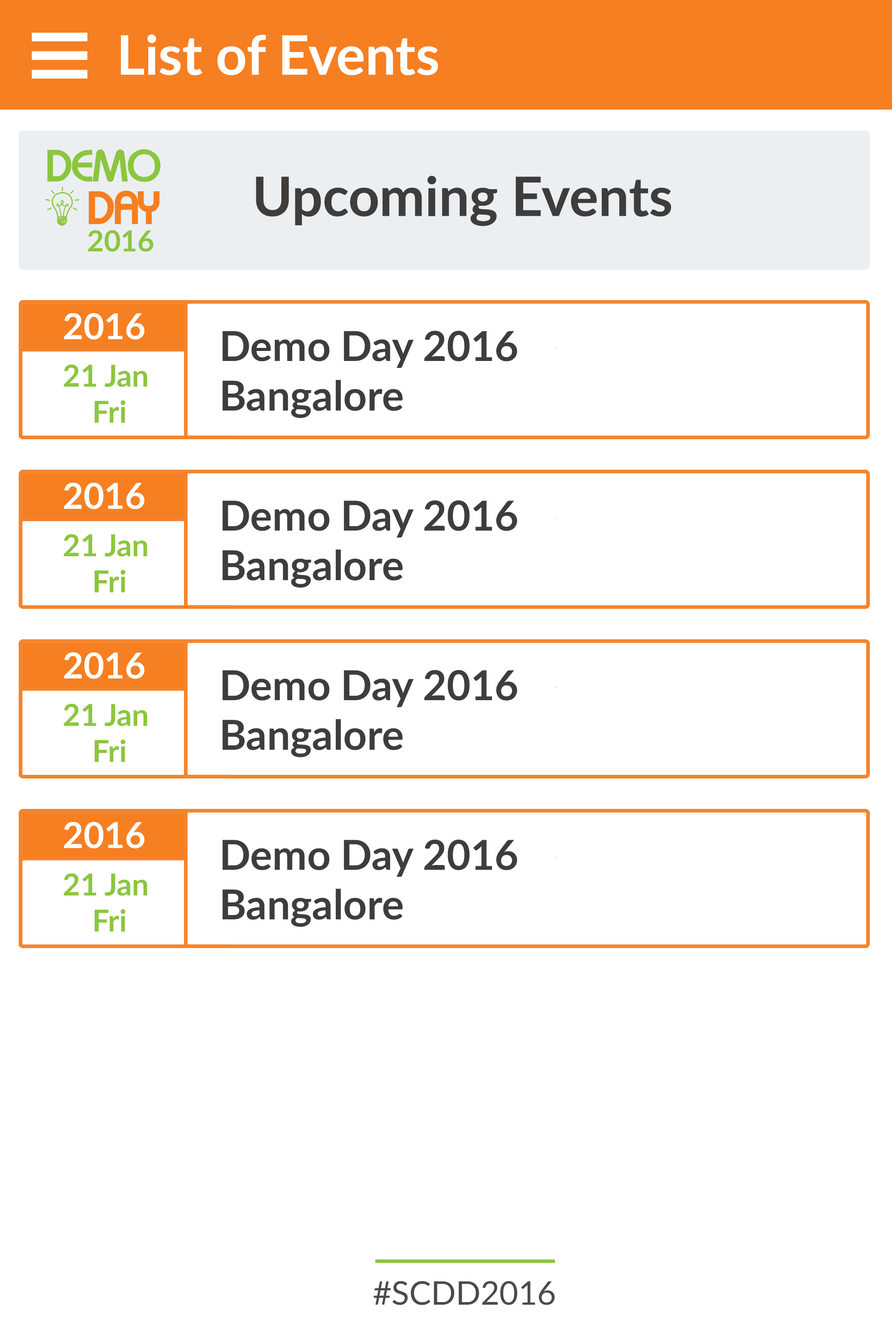
<style>
.page{position:relative;width:892px;height:1336px;background:#ffffff}
.page>*{position:absolute;margin:0}
.t1{font:54.4px "Lato-Bold";color:#ffffff}
.t2{font:54.4px "Lato-Bold";color:#3e3d3c}
.t3{font:35.7px "Lato-Bold";color:#ffffff}
.t4{font:41.3px "Lato-Bold";color:#3e3d3c}
.t5{font:30.2px "Lato-Bold";color:#8cc63f}
.t6{font:32.6px "Lato-Regular";color:#4a4b49}
</style>
<div class="page">
<p class="t1" style="left:121px;top:34px;width:317px;height:41px">List of Events</p>
<p class="t2" style="left:256px;top:176px;width:415px;height:50px">Upcoming Events</p>
<p class="t3" style="left:64px;top:313px;width:80px;height:27px">2016</p>
<p class="t4" style="left:222px;top:331px;width:295px;height:88px">Demo Day 2016<br>Bangalore</p>
<p class="t5" style="left:64px;top:365px;width:83px;height:58px;text-align:center">21 Jan <br>Fri</p>
<p class="t3" style="left:64px;top:482px;width:80px;height:27px">2016</p>
<p class="t4" style="left:222px;top:500px;width:295px;height:88px">Demo Day 2016<br>Bangalore</p>
<p class="t5" style="left:64px;top:534px;width:83px;height:59px;text-align:center">21 Jan <br>Fri</p>
<p class="t3" style="left:64px;top:652px;width:80px;height:27px">2016</p>
<p class="t4" style="left:222px;top:670px;width:295px;height:88px">Demo Day 2016<br>Bangalore</p>
<p class="t5" style="left:64px;top:704px;width:83px;height:58px;text-align:center">21 Jan <br>Fri</p>
<p class="t3" style="left:64px;top:822px;width:80px;height:27px">2016</p>
<p class="t4" style="left:222px;top:840px;width:295px;height:87px">Demo Day 2016<br>Bangalore</p>
<p class="t5" style="left:64px;top:874px;width:83px;height:58px;text-align:center">21 Jan <br>Fri</p>
<p class="t6" style="left:374px;top:1281px;width:181px;height:25px">#SCDD2016</p>
</div>
